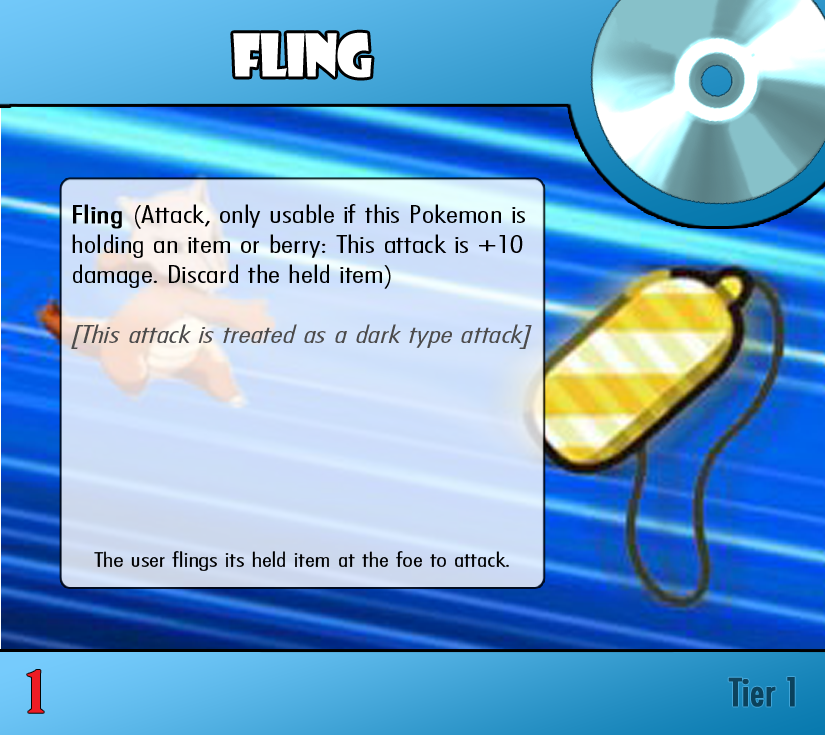
<style>
.page{position:relative;width:825px;height:735px}
.page>*{position:absolute;margin:0}
.t1{font:57.4px "ShowcardGothic-Reg";letter-spacing:-0.025em;color:#ffffff;scale:0.91 1}
.t2{font:25px "FuturaCondensedBQ-Light";color:#000000;scale:1.5 1}
.t3{font:25px "FuturaCondensedBQ-Light";color:#000000;font-weight:bold;scale:1.5 1}
.t4{font:25px "FuturaCondensedBQ-Light";color:#4c4b4b;font-style:italic;scale:1.5 1}
.t5{font:20.8px "FuturaCondensedBQ-Light";color:#000000;scale:1.5 1}
.t6{font:55.6px "BirchStd";color:#ed1c24;font-weight:bold;scale:1.5 1}
.t7{font:37.5px "Futura-Condensed-Normal";color:#0c425d;font-weight:bold}
</style>
<div class="page">
<p class="t1" style="left:233px;top:32px;width:139px;height:46px">Fling</p>
<p class="t2" style="left:71px;top:204px;width:461px;height:145px"><span class="t3">Fling </span>(Attack, only usable if this Pokemon is holding an item or berry: This attack is +10 damage. Discard the held item)<br><br><span class="t4">[This attack is treated as a dark type attack]</span></p>
<p class="t5" style="left:94px;top:551px;width:415px;height:20px">The user flings its held item at the foe to attack.</p>
<p class="t6" style="left:27px;top:670px;width:17px;height:43px">1</p>
<p class="t7" style="left:728px;top:677px;width:67px;height:30px">Tier 1</p>
</div>
